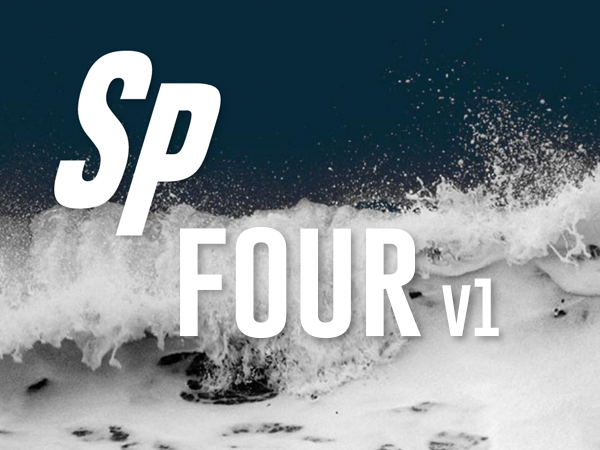
<style>
.page{position:relative;width:600px;height:450px}
.page>*{position:absolute;margin:0}
.t1{font:127px "Gobold";color:#ffffff}
.t2{font:60px "Gobold";color:#ffffff}
</style>
<div class="page">
<p class="t1" style="left:180px;top:226px;width:241px;height:112px">four</p>
<p class="t2" style="left:442px;top:278px;width:57px;height:58px">v1</p>
</div>
